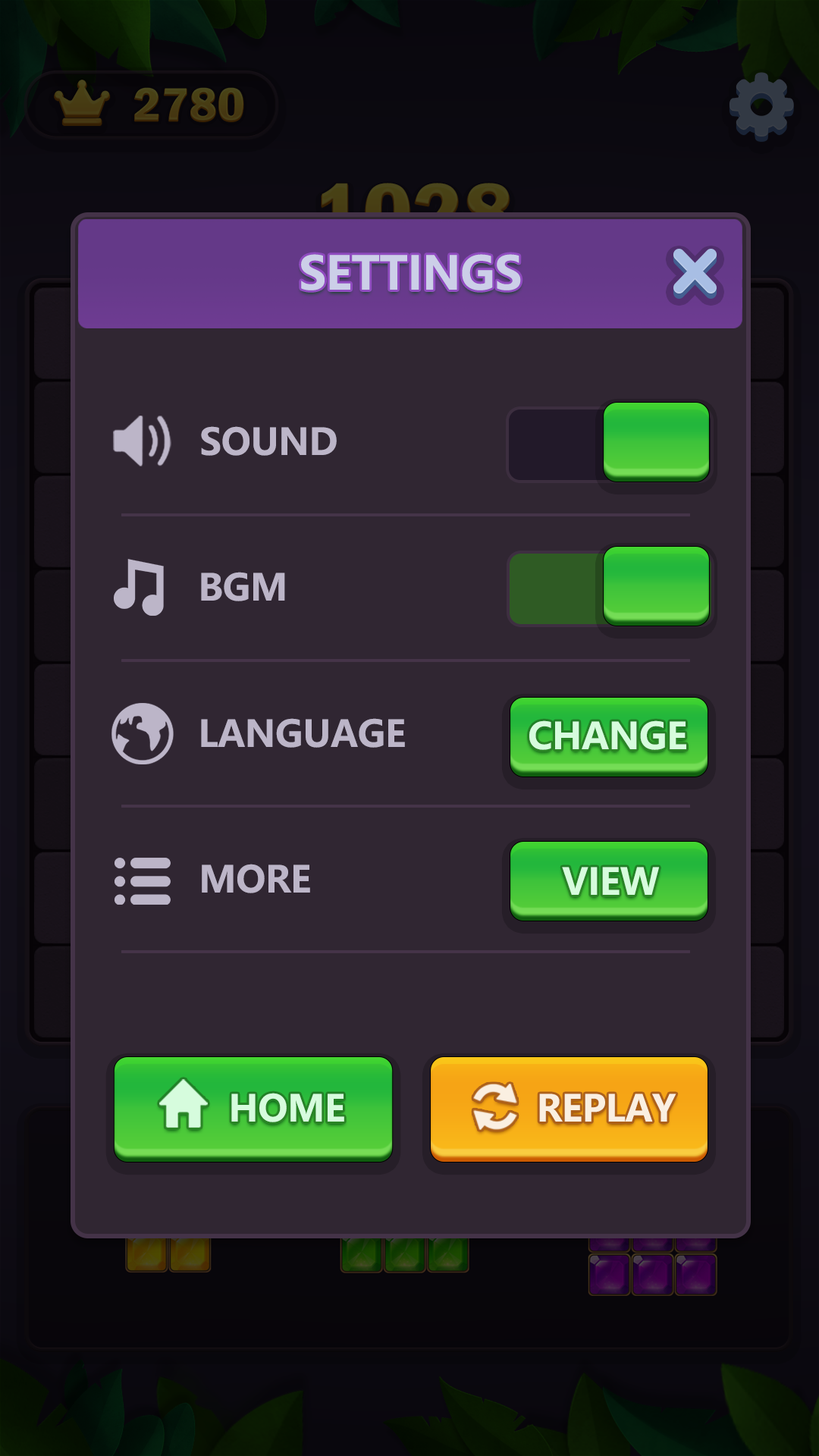
<style>
.page{position:relative;width:819px;height:1456px;background:#302632}
.page>*{position:absolute;margin:0}
.t1{font:45.5px "MicrosoftYaHei-Bold";letter-spacing:-0.01em;color:#cccfe8}
.t2{font:36.4px "MicrosoftYaHei-Bold";letter-spacing:-0.01em;color:#bcb5c8;text-transform:uppercase}
.t3{font:36.4px "MicrosoftYaHei-Bold";letter-spacing:-0.01em;color:#d6fcdd}
.t4{font:36.4px "MicrosoftYaHei-Bold";letter-spacing:-0.01em;color:#faefe1}
</style>
<div class="page">
<p class="t1" style="left:301px;top:254px;width:220px;height:36px">SETTINGS</p>
<p class="t2" style="left:201px;top:426px;width:136px;height:30px">sound</p>
<p class="t2" style="left:201px;top:572px;width:84px;height:29px">BGM</p>
<p class="t2" style="left:201px;top:718px;width:204px;height:30px">Language</p>
<p class="t3" style="left:529px;top:720px;width:157px;height:30px">CHANGE</p>
<p class="t2" style="left:202px;top:864px;width:108px;height:29px">More</p>
<p class="t3" style="left:562px;top:867px;width:97px;height:28px">VIEW</p>
<p class="t3" style="left:231px;top:1093px;width:113px;height:29px">HOME</p>
<p class="t4" style="left:539px;top:1094px;width:137px;height:28px">REPLAY</p>
</div>
